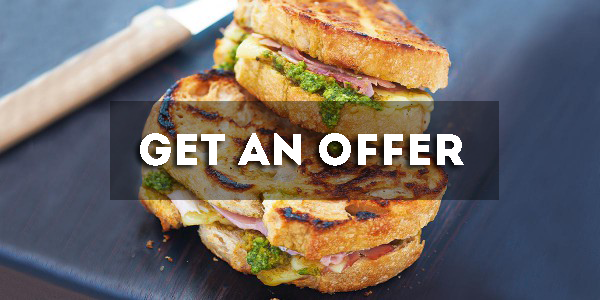
<style>
.page{position:relative;width:600px;height:300px}
.page>*{position:absolute;margin:0}
.t1{font:45px "Intro";color:#ffffff}
</style>
<div class="page">
<p class="t1" style="left:140px;top:133px;width:324px;height:33px">GET AN OFFER</p>
</div>
